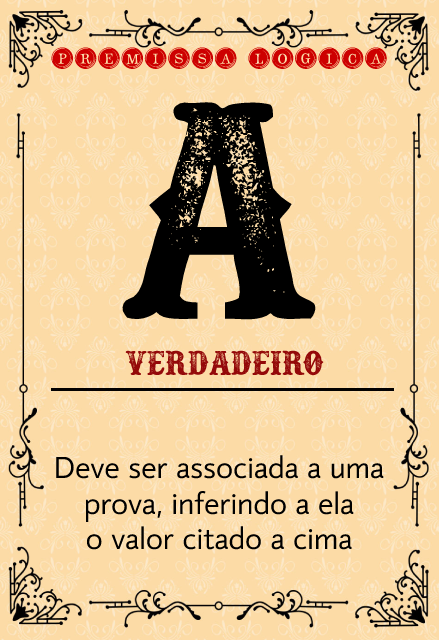
<style>
.page{position:relative;width:439px;height:640px;background:#fcdba6}
.page>*{position:absolute;margin:0}
.t1{font:28.9px "TypeKeysFilled";color:#cd0000}
.t2{font:345px "Docktrin";color:#000000}
.t3{font:38.4px "Docktrin";color:#940909}
.t4{font:29.5px "mirror82";color:#000000}
</style>
<div class="page">
<p class="t1" style="left:51px;top:47px;width:336px;height:22px">premissa logica</p>
<p class="t2" style="left:122px;top:102px;width:194px;height:218px">A</p>
<p class="t3" style="left:125px;top:350px;width:199px;height:26px">Verdadeiro</p>
<p class="t4" style="left:56px;top:455px;width:328px;height:95px;text-align:center">Deve ser associada a uma<br>prova, inferindo a ela<br>o valor citado a cima</p>
</div>
